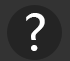
<style>
.page{position:relative;width:70px;height:61px;background:#242424}
.page>*{position:absolute;margin:0}
.t1{font:50px "MicrosoftYaHei";color:#ffffff}
</style>
<div class="page">
<p class="t1" style="left:26px;top:13px;width:19px;height:38px">?</p>
</div>
